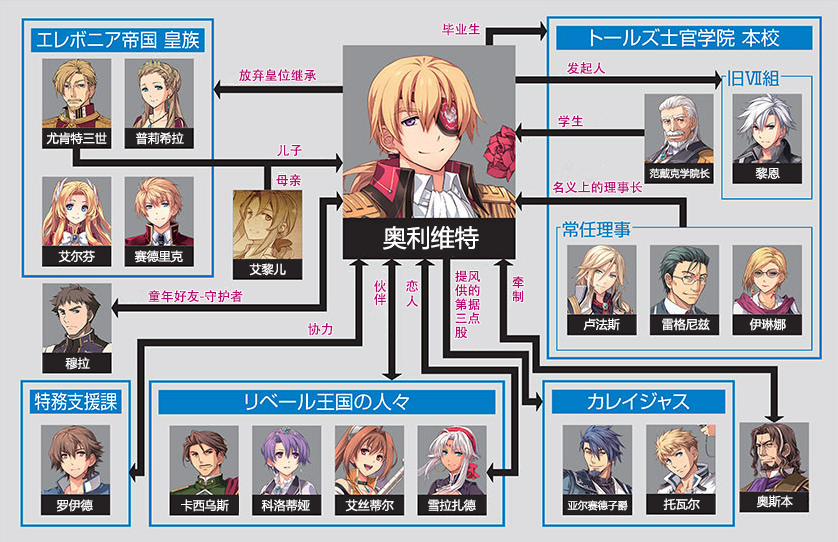
<style>
.page{position:relative;width:838px;height:542px;background:#dddddf}
.page>*{position:absolute;margin:0}
.t1{font:13px "AdobeHeitiStd-Regular";color:#b70773}
.t2{font:12px "MicrosoftYaHei";color:#ffffff}
.t3{font:10px "MicrosoftYaHei";color:#ffffff}
.t4{font:24px "MicrosoftYaHei";color:#ffffff}
.t5{font:13px/14px "AdobeHeitiStd-Regular";color:#b70773}
.t6{font:13px/13px "AdobeHeitiStd-Regular";color:#b70773}
.t7{font:13px/15px "AdobeHeitiStd-Regular";color:#b70773}
</style>
<div class="page">
<p class="t1" style="left:442px;top:23px;width:38px;height:13px">毕业生</p>
<p class="t1" style="left:567px;top:62px;width:39px;height:13px">发起人</p>
<p class="t1" style="left:239px;top:69px;width:78px;height:13px">放弃皇位继承权</p>
<p class="t1" style="left:558px;top:115px;width:25px;height:13px">学生</p>
<p class="t2" style="left:46px;top:132px;width:61px;height:13px">尤肯特三世</p>
<p class="t2" style="left:136px;top:132px;width:48px;height:13px">普莉希拉</p>
<p class="t1" style="left:277px;top:145px;width:25px;height:12px">儿子</p>
<p class="t1" style="left:276px;top:174px;width:25px;height:13px">母亲</p>
<p class="t3" style="left:649px;top:168px;width:61px;height:11px">范戴克学院长</p>
<p class="t2" style="left:755px;top:167px;width:25px;height:13px">黎恩</p>
<p class="t1" style="left:552px;top:181px;width:90px;height:13px">名义上的理事长</p>
<p class="t4" style="left:383px;top:226px;width:96px;height:24px">奥利维特</p>
<p class="t2" style="left:58px;top:250px;width:37px;height:13px">艾尔芬</p>
<p class="t2" style="left:134px;top:250px;width:49px;height:13px">赛德里克</p>
<p class="t2" style="left:249px;top:263px;width:37px;height:13px">艾黎儿</p>
<p class="t5" style="left:454px;top:270px;width:27px;height:69px">提风<br>供的<br>第据<br>三点<br>股</p>
<p class="t6" style="left:374px;top:280px;width:13px;height:26px">伙<br>伴</p>
<p class="t7" style="left:406px;top:280px;width:13px;height:27px">恋<br>人</p>
<p class="t5" style="left:512px;top:276px;width:12px;height:27px">牵<br>制</p>
<p class="t1" style="left:148px;top:290px;width:95px;height:13px">童年好友-守护者</p>
<p class="t2" style="left:583px;top:318px;width:37px;height:13px">卢法斯</p>
<p class="t2" style="left:662px;top:318px;width:48px;height:13px">雷格尼兹</p>
<p class="t2" style="left:749px;top:318px;width:37px;height:13px">伊琳娜</p>
<p class="t1" style="left:308px;top:323px;width:25px;height:13px">协力</p>
<p class="t2" style="left:65px;top:357px;width:25px;height:13px">穆拉</p>
<p class="t2" style="left:756px;top:495px;width:37px;height:13px">奥斯本</p>
<p class="t2" style="left:56px;top:499px;width:37px;height:13px">罗伊德</p>
<p class="t2" style="left:181px;top:499px;width:48px;height:13px">卡西乌斯</p>
<p class="t2" style="left:261px;top:499px;width:49px;height:13px">科洛蒂娅</p>
<p class="t2" style="left:345px;top:499px;width:49px;height:13px">艾丝蒂尔</p>
<p class="t2" style="left:428px;top:499px;width:48px;height:13px">雪拉扎德</p>
<p class="t3" style="left:567px;top:500px;width:61px;height:11px">亚尔赛德子爵</p>
<p class="t2" style="left:663px;top:498px;width:37px;height:12px">托瓦尔</p>
</div>
